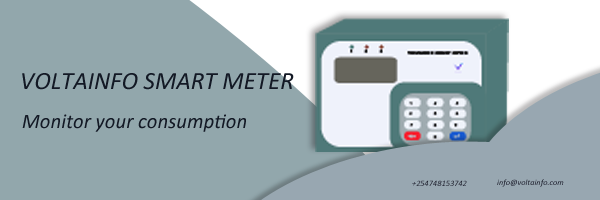
<style>
.page{position:relative;width:600px;height:200px;background:#92a7ac}
.page>*{position:absolute;margin:0}
.t1{font:25px "Calibri-Italic";color:#040e17}
.t2{font:20.8px "Calibri-Italic";color:#040e17}
.t3{font:8.3px "Calibri-Italic";color:#131925}
.t4{font:8.3px "Calibri-Italic"}
</style>
<div class="page">
<p class="t1" style="left:22px;top:73px;width:272px;height:17px">VOLTAINFO SMART METER</p>
<p class="t2" style="left:22px;top:114px;width:224px;height:18px">Monitor your consumption</p>
<p class="t3" style="left:412px;top:180px;width:55px;height:6px">+254748153742</p>
<p class="t4" style="left:497px;top:179px;width:67px;height:8px">info@voltainfo.com</p>
</div>
